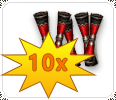
<style>
.page{position:relative;width:116px;height:100px;background:#ffffff}
.page>*{position:absolute;margin:0}
.t1{font:20px "MicrosoftYaHei";letter-spacing:0.1em;color:#ff7200;font-weight:bold}
</style>
<div class="page">
<p class="t1" style="left:29px;top:54px;width:38px;height:17px">10x</p>
</div>
